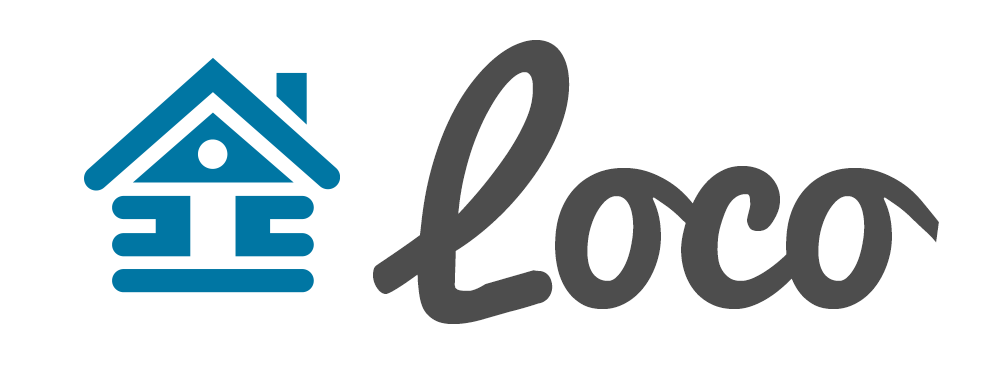
<style>
.page{position:relative;width:1000px;height:379px;background:#ffffff}
.page>*{position:absolute;margin:0}
.t1{font:294.1px "Pacifico";color:#4d4d4d}
</style>
<div class="page">
<p class="t1" style="left:373px;top:40px;width:566px;height:284px">Loco</p>
</div>
